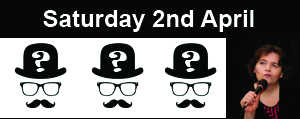
<style>
.page{position:relative;width:300px;height:119px;background:#060808}
.page>*{position:absolute;margin:0}
.t1{font:24px "Arial-BoldMT";color:#ffffff}
</style>
<div class="page">
<p class="t1" style="left:43px;top:10px;width:211px;height:22px">Saturday 2nd April</p>
</div>
